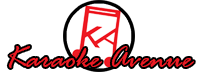
<style>
.page{position:relative;width:200px;height:72px;background:#ffffff}
.page>*{position:absolute;margin:0}
.t1{font:32px "RageItalic";color:#ed1b24}
</style>
<div class="page">
<p class="t1" style="left:8px;top:46px;width:186px;height:22px">Karaoke Avenue</p>
</div>
